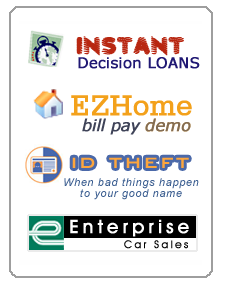
<style>
.page{position:relative;width:228px;height:291px;background:#ffffff}
.page>*{position:absolute;margin:0}
.t1{font:24px "PantsPatrol";color:#b82711;font-weight:bold}
.t2{font:14.7px "Verdana";color:#201873;font-weight:bold}
.t3{font:30px "SerifaBT-Roman";color:#f3a11b;font-weight:bold}
.t4{font:16px "Verdana-Italic";letter-spacing:-0.025em;color:#3f4358;font-weight:bold}
.t5{font:16px "Verdana-Italic";color:#826c54;font-weight:bold}
.t6{font:24px "BankGothicBT-Medium";letter-spacing:0.075em;color:#fea63c}
.t7{font:10.7px/10.7px "Arial-ItalicMT";letter-spacing:0.075em;color:#395c8f}
.t8{font:18.7px "AvantGardeITCbyBT-Medium";letter-spacing:0.2em;color:#ffffff;font-weight:bold}
.t9{font:10.7px "AvantGardeITCbyBT-Book";letter-spacing:0.2em;color:#000000;font-weight:bold}
</style>
<div class="page">
<p class="t1" style="left:76px;top:36px;width:108px;height:20px">INSTANT</p>
<p class="t2" style="left:78px;top:57px;width:122px;height:12px">Decision LOANS</p>
<p class="t3" style="left:71px;top:95px;width:121px;height:21px">EZHome</p>
<p class="t4" style="left:82px;top:118px;width:59px;height:17px">bill pay</p>
<p class="t5" style="left:145px;top:118px;width:46px;height:14px">demo</p>
<p class="t5" style="left:145px;top:118px;width:46px;height:14px">demo</p>
<p class="t6" style="left:72px;top:157px;width:117px;height:11px">id theft</p>
<p class="t7" style="left:64px;top:178px;width:135px;height:22px;text-align:center">When bad things happen <br>to your good name</p>
<p class="t8" style="left:70px;top:219px;width:119px;height:18px">Enterprise</p>
<p class="t9" style="left:124px;top:240px;width:64px;height:9px">Car Sales</p>
</div>
